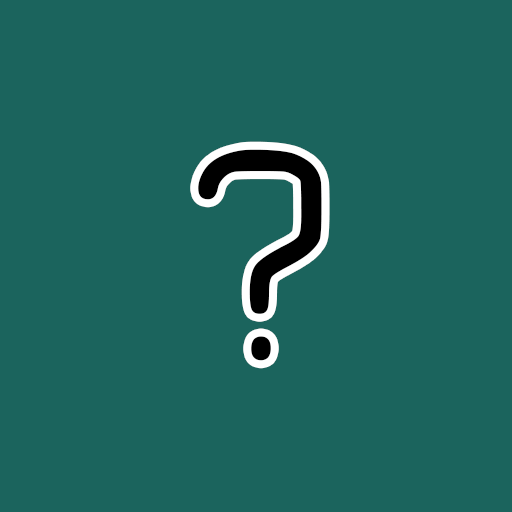
<style>
.page{position:relative;width:512px;height:512px;background:#1b645d}
.page>*{position:absolute;margin:0}
.t1{font:250px "CosmFontRegular";letter-spacing:0.15em;color:#000000}
</style>
<div class="page">
<p class="t1" style="left:198px;top:149px;width:124px;height:212px">?</p>
</div>
